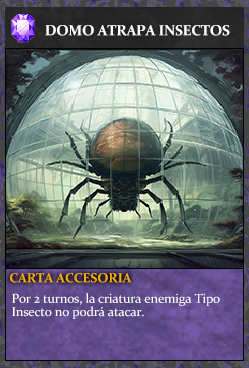
<style>
.page{position:relative;width:249px;height:368px}
.page>*{position:absolute;margin:0}
.t1{font:14.7px "Constantia-Bold";letter-spacing:-0.02em;color:#ffffff}
.t2{font:13.3px "Constantia-Bold";letter-spacing:-0.02em;color:#f2ac05}
.t3{font:13.1px/13.3px "Constantia";letter-spacing:-0.02em;color:#ffffff}
</style>
<div class="page">
<p class="t1" style="left:45px;top:25px;width:185px;height:11px">DOMO ATRAPA INSECTOS</p>
<p class="t2" style="left:10px;top:273px;width:122px;height:10px">CARTA ACCESORIA</p>
<p class="t3" style="left:12px;top:293px;width:208px;height:26px">Por 2 turnos, la criatura enemiga Tipo<br>Insecto no podrá atacar.</p>
</div>
